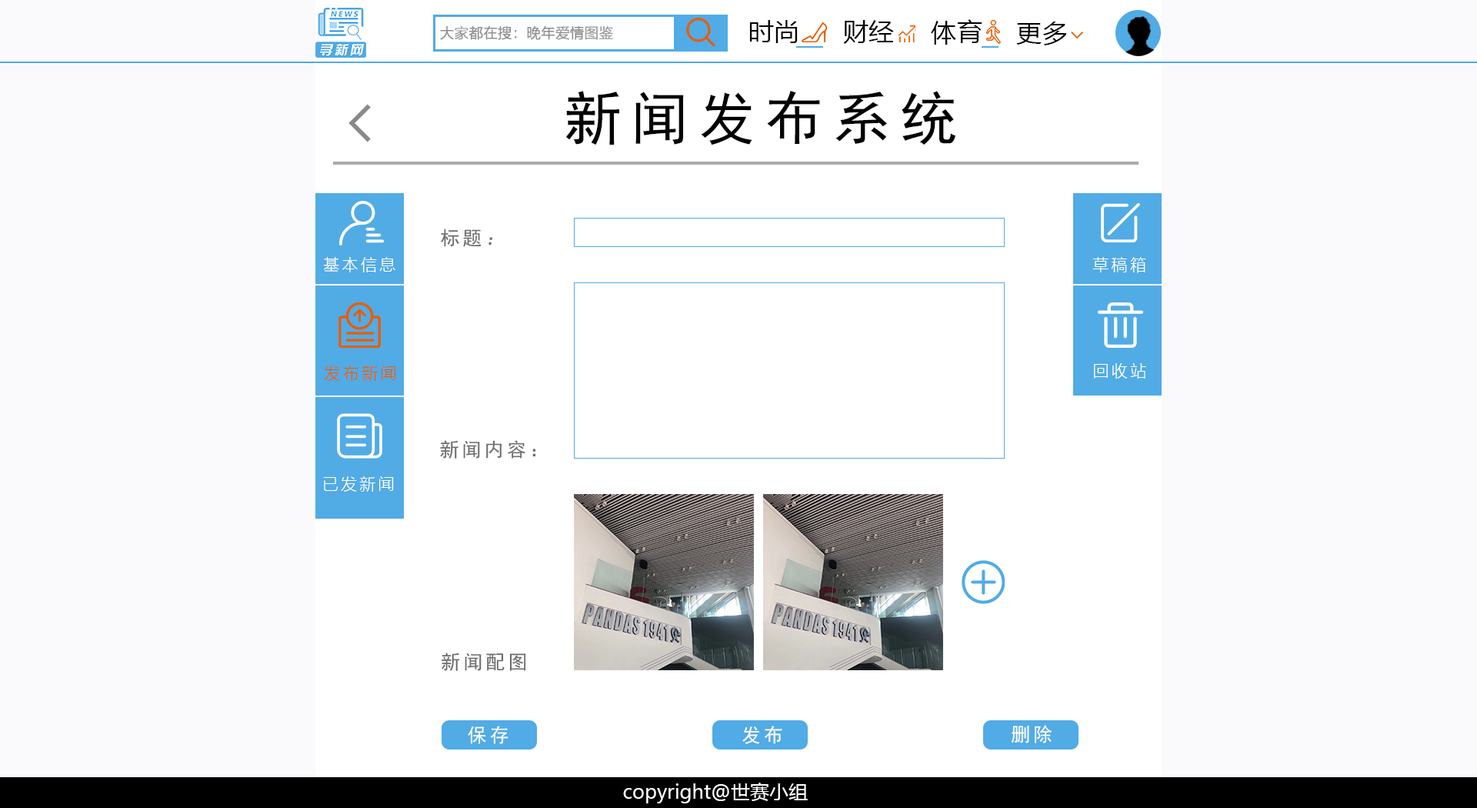
<style>
.page{position:relative;width:1477px;height:808px;background:#fafafc}
.page>*{position:absolute;margin:0}
.t1{font:14.1px "MicrosoftYaHeiLight";color:#8f8f8f;font-weight:bold}
.t2{font:25.6px "MicrosoftYaHei";color:#000000}
.t3{font:57.7px "SimHei";letter-spacing:0.165em;color:#000203}
.t4{font:19.2px "SimHei";letter-spacing:0.165em;color:#6d6c6c}
.t5{font:19.2px "SimHei";letter-spacing:0.165em;color:#6d6c6c;font-style:italic}
.t6{font:16px "MicrosoftYaHeiLight";letter-spacing:0.165em;color:#fefefe}
.t7{font:16px "MicrosoftYaHeiLight";letter-spacing:0.165em;color:#ec5c00}
.t8{font:16px "MicrosoftYaHeiLight";letter-spacing:0.165em;color:#ffffff}
.t9{font:16px "MicrosoftYaHeiLight";letter-spacing:0.165em;color:#fffefe}
.t10{font:19.2px "SimHei";letter-spacing:0.165em;color:#ffffff}
.t11{font:19.2px "MicrosoftYaHei";color:#fefefe}
</style>
<div class="page">
<p class="t1" style="left:440px;top:26px;width:173px;height:14px">大家都在搜：晚年爱情图鉴</p>
<p class="t2" style="left:749px;top:20px;width:49px;height:23px">时尚</p>
<p class="t2" style="left:843px;top:20px;width:51px;height:24px">财经</p>
<p class="t2" style="left:931px;top:19px;width:51px;height:26px">体育</p>
<p class="t2" style="left:1016px;top:22px;width:50px;height:23px">更多</p>
<p class="t3" style="left:565px;top:91px;width:390px;height:54px">新闻发布系统</p>
<p class="t4" style="left:441px;top:228px;width:51px;height:19px">标题<span class="t5">：</span></p>
<p class="t6" style="left:323px;top:256px;width:72px;height:16px">基本信息</p>
<p class="t6" style="left:1092px;top:257px;width:54px;height:16px">草稿箱</p>
<p class="t7" style="left:324px;top:365px;width:72px;height:16px">发布新闻</p>
<p class="t8" style="left:1094px;top:363px;width:52px;height:15px">回收站</p>
<p class="t4" style="left:440px;top:440px;width:96px;height:18px">新闻内容：</p>
<p class="t9" style="left:323px;top:476px;width:71px;height:15px">已发新闻</p>
<p class="t4" style="left:441px;top:652px;width:85px;height:19px">新闻配图</p>
<p class="t10" style="left:468px;top:725px;width:40px;height:19px">保存</p>
<p class="t10" style="left:742px;top:725px;width:40px;height:19px">发布</p>
<p class="t10" style="left:1011px;top:724px;width:41px;height:19px">删除</p>
<p class="t11" style="left:623px;top:782px;width:185px;height:21px">copyright@世赛小组</p>
</div>
